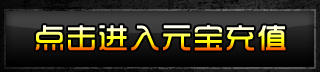
<style>
.page{position:relative;width:320px;height:72px}
.page>*{position:absolute;margin:0}
.t1{font:30px "TRENDS";letter-spacing:0.06em}
</style>
<div class="page">
<p class="t1" style="left:35px;top:25px;width:251px;height:26px">点击进入元宝充值</p>
</div>
